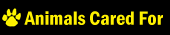
<style>
.page{position:relative;width:170px;height:35px;background:#000000}
.page>*{position:absolute;margin:0}
.t1{font:20px "FranklinGotT-DemCon";color:#fff100}
</style>
<div class="page">
<p class="t1" style="left:24px;top:11px;width:139px;height:14px">Animals Cared For</p>
</div>
